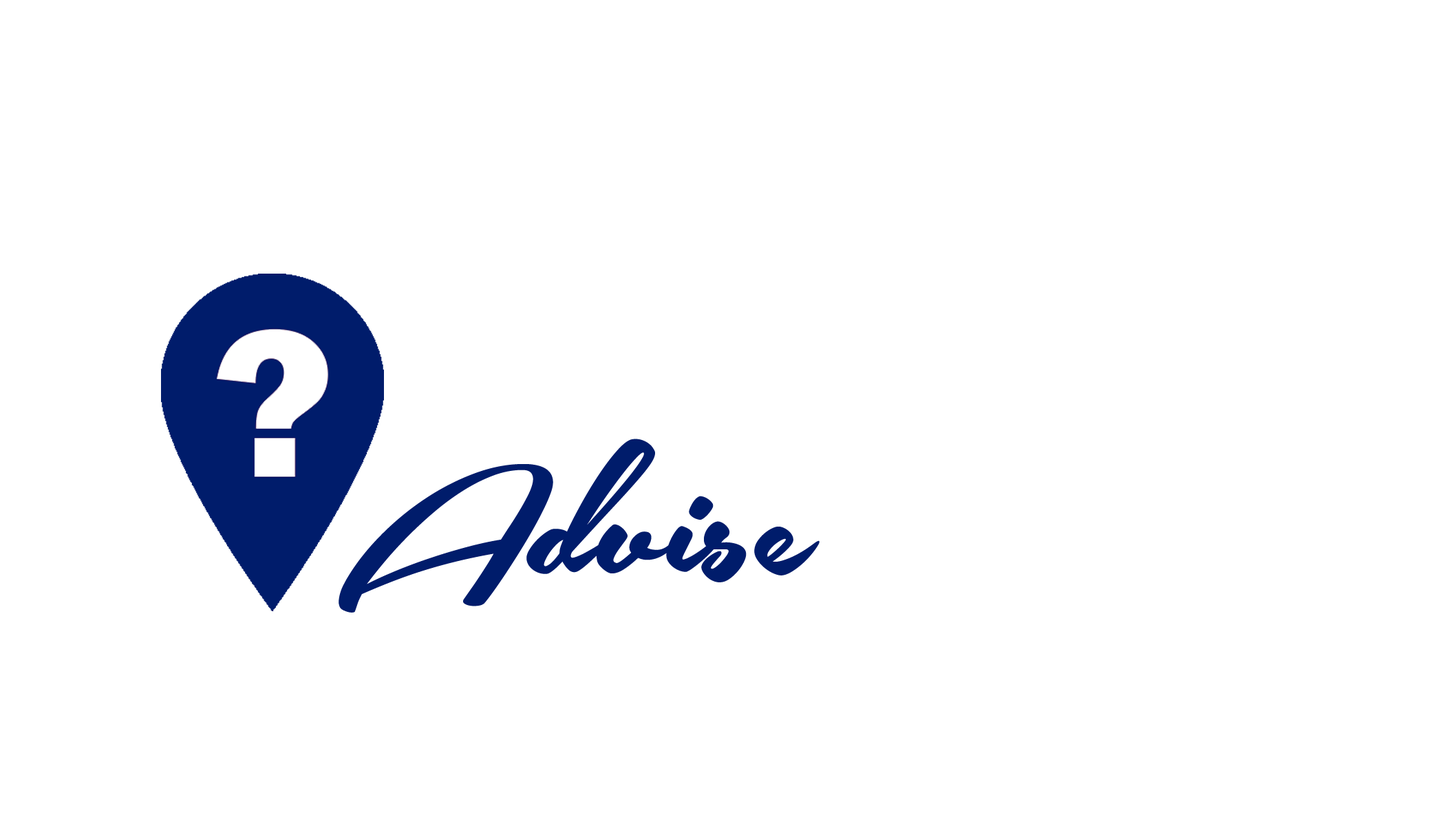
<style>
.page{position:relative;width:1445px;height:825px;background:#ffffff}
.page>*{position:absolute;margin:0}
.t1{font:240.8px "SouthernAirePersonalUseOnly";letter-spacing:-0.005em;color:#001c6b}
</style>
<div class="page">
<p class="t1" style="left:338px;top:439px;width:481px;height:174px">Advise</p>
</div>
